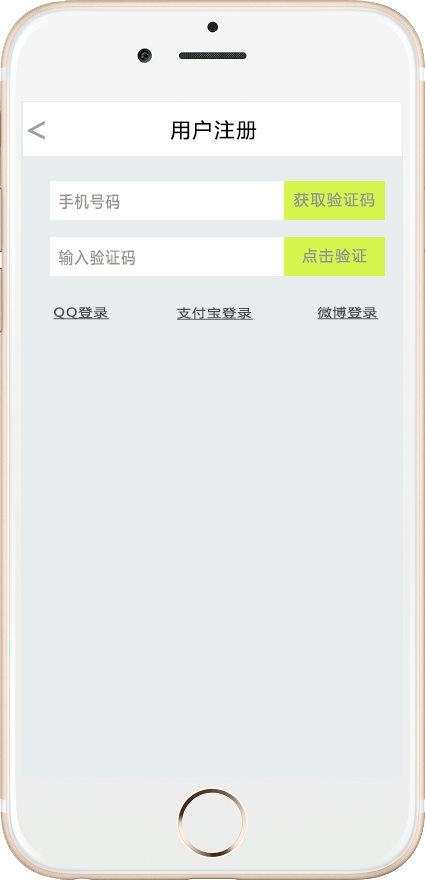
<style>
.page{position:relative;width:425px;height:880px;background:#e8eced}
.page>*{position:absolute;margin:0}
.t1{font:36px "MicrosoftYaHei";letter-spacing:0.1em;color:#a49e9e}
.t2{font:20px "MicrosoftYaHei";letter-spacing:0.1em;color:#000000}
.t3{font:16px "MicrosoftYaHei";letter-spacing:0.1em;color:#949291;scale:0.89 1}
.t4{font:15px "MicrosoftYaHei";letter-spacing:0.1em;color:#949291}
.t5{font:11.9px "MicrosoftYaHei";letter-spacing:0.1em;color:#4a4a4a;text-decoration:underline;scale:1.15 1}
</style>
<div class="page">
<p class="t1" style="left:28px;top:120px;width:17px;height:20px">&lt;</p>
<p class="t2" style="left:170px;top:120px;width:87px;height:20px">用户注册</p>
<p class="t3" style="left:59px;top:193px;width:61px;height:17px">手机号码</p>
<p class="t4" style="left:294px;top:192px;width:81px;height:16px">获取验证码</p>
<p class="t3" style="left:59px;top:249px;width:76px;height:17px">输入验证码</p>
<p class="t4" style="left:302px;top:248px;width:65px;height:15px">点击验证</p>
<p class="t5" style="left:53px;top:306px;width:56px;height:14px">QQ登录</p>
<p class="t5" style="left:177px;top:307px;width:76px;height:13px">支付宝登录</p>
<p class="t5" style="left:317px;top:306px;width:62px;height:14px">微博登录</p>
</div>
